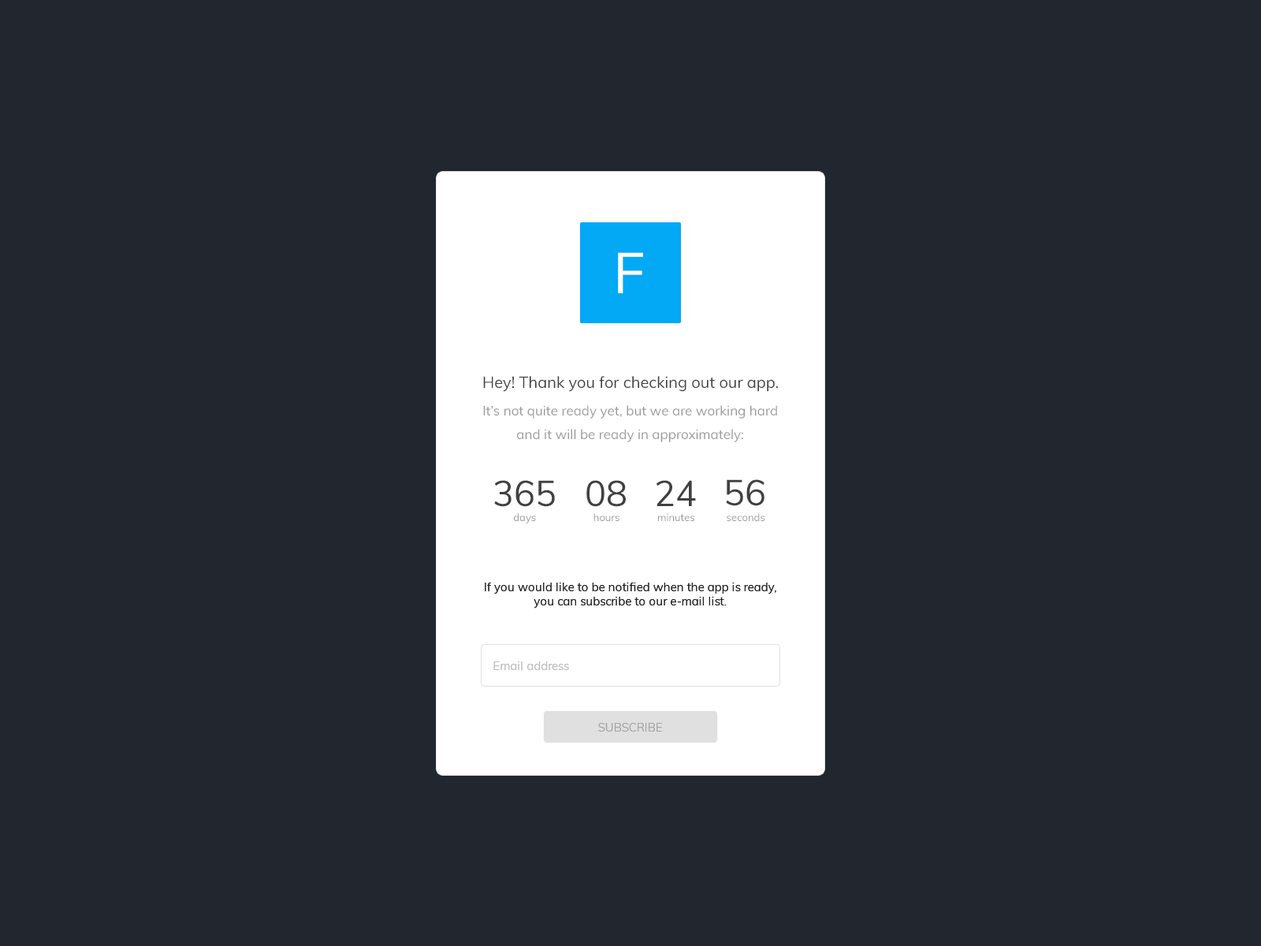
<style>
.page{position:relative;width:1261px;height:946px;background:#22262f}
.page>*{position:absolute;margin:0}
.t1{font:56.7px "Muli-Regular";color:#ffffff}
.t2{font:15.8px "Muli-Regular";color:#404040}
.t3{font:13.4px "Muli-Regular";color:#9a9a9a}
.t4{font:35.5px "Muli-Regular";color:#404040}
.t5{font:10.2px "Muli-Regular";color:#9a9a9a}
.t6{font:11.8px/14.2px "Muli-Regular";color:#212121}
.t7{font:11.8px "Muli-Regular";color:#bdbdbd}
.t8{font:11.8px "Muli-Regular";color:#a6a6a6}
</style>
<div class="page">
<p class="t1" style="left:618px;top:252px;width:25px;height:41px">F</p>
<p class="t2" style="left:483px;top:376px;width:295px;height:16px">Hey! Thank you for checking out our app.</p>
<p class="t3" style="left:483px;top:405px;width:294px;height:37px;text-align:center">It’s not quite ready yet, but we are working hard<br>and it will be ready in approximately:</p>
<p class="t4" style="left:494px;top:480px;width:61px;height:27px">365</p>
<p class="t4" style="left:586px;top:480px;width:40px;height:27px">08</p>
<p class="t4" style="left:656px;top:480px;width:40px;height:26px">24</p>
<p class="t4" style="left:726px;top:479px;width:38px;height:27px">56</p>
<p class="t5" style="left:513px;top:513px;width:23px;height:10px">days</p>
<p class="t5" style="left:593px;top:513px;width:26px;height:8px">hours</p>
<p class="t5" style="left:658px;top:513px;width:36px;height:8px">minutes</p>
<p class="t5" style="left:727px;top:513px;width:38px;height:8px">seconds</p>
<p class="t6" style="left:485px;top:582px;width:291px;height:26px;text-align:center">If you would like to be notified when the app is ready,<br>you can subscribe to our e-mail list.</p>
<p class="t7" style="left:493px;top:661px;width:76px;height:9px">Email address</p>
<p class="t8" style="left:598px;top:723px;width:64px;height:8px">SUBSCRIBE</p>
</div>
